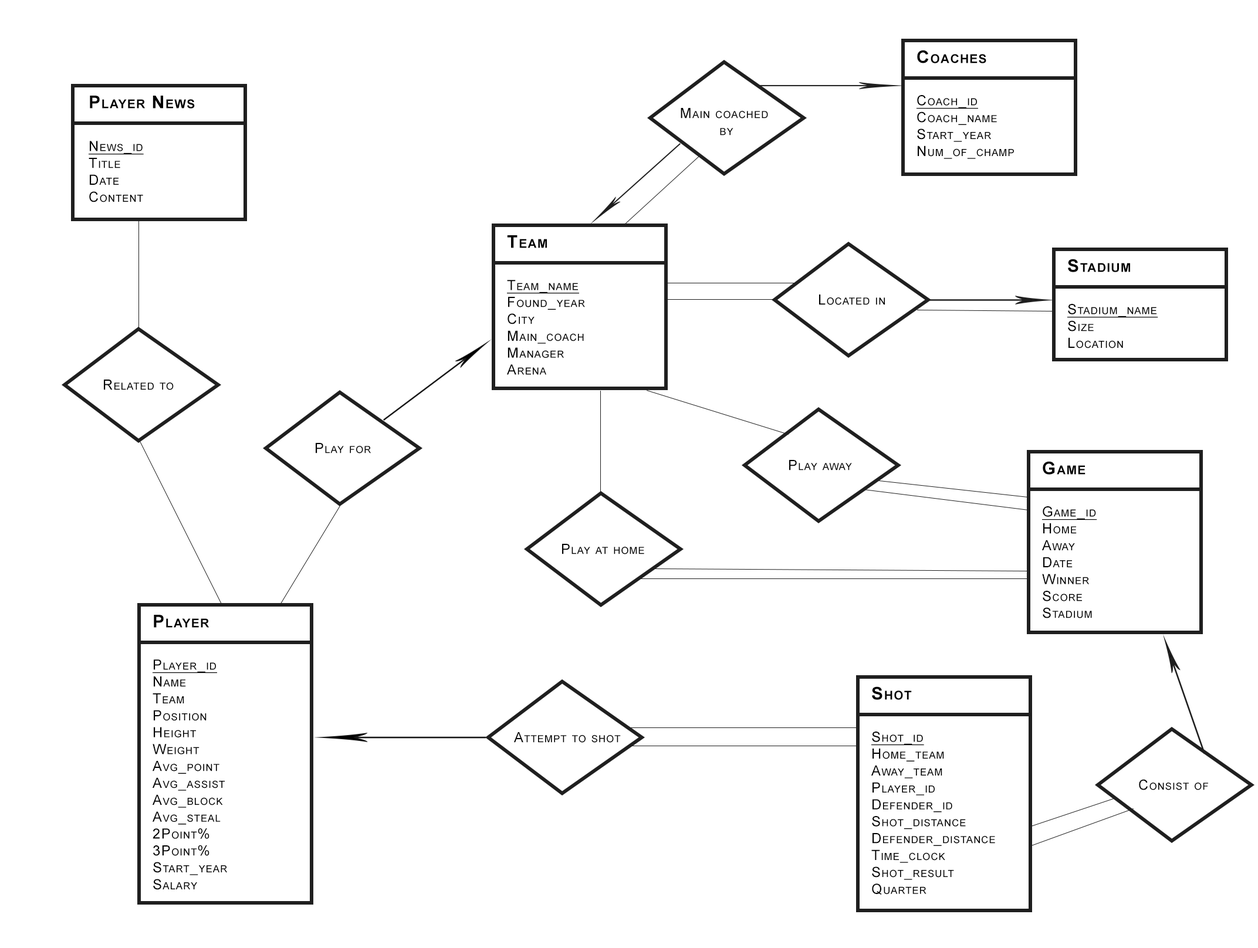
<style>
.page{position:relative;width:1258px;height:948px;background:#ffffff}
.page>*{position:absolute;margin:0}
.t1{font:17.6px "Arial-BoldMT";letter-spacing:0.06em;color:#000000;font-variant:small-caps}
.t2{font:14.1px "ArialMT";letter-spacing:0.06em;color:#000000;font-variant:small-caps}
.t3{font:14.1px "ArialMT";letter-spacing:0.06em;color:#000000;font-variant:small-caps;text-decoration:underline}
</style>
<div class="page">
<p class="t1" style="left:917px;top:50px;width:69px;height:13px">Coaches</p>
<p class="t1" style="left:90px;top:96px;width:105px;height:13px">Player News</p>
<p class="t2" style="left:916px;top:95px;width:98px;height:64px"><span class="t3">Coach_id<br></span>Coach_name<br>Start_year<br>Num_of_champ</p>
<p class="t2" style="left:681px;top:108px;width:87px;height:28px;text-align:center">Main coached <br>by</p>
<p class="t2" style="left:89px;top:141px;width:55px;height:61px"><span class="t3">News_id<br></span>Title<br>Date<br>Content</p>
<p class="t1" style="left:507px;top:235px;width:40px;height:13px">Team</p>
<p class="t1" style="left:1068px;top:259px;width:62px;height:13px">Stadium</p>
<p class="t2" style="left:507px;top:280px;width:78px;height:95px"><span class="t3">Team_name<br></span>Found_year<br>City<br>Main_coach<br>Manager<br>Arena</p>
<p class="t2" style="left:819px;top:295px;width:66px;height:10px">Located in</p>
<p class="t2" style="left:1067px;top:304px;width:91px;height:44px"><span class="t3">Stadium_name<br></span>Size<br>Location</p>
<p class="t2" style="left:104px;top:380px;width:70px;height:10px">Related to</p>
<p class="t2" style="left:316px;top:443px;width:55px;height:10px">Play for</p>
<p class="t2" style="left:789px;top:460px;width:63px;height:10px">Play away</p>
<p class="t1" style="left:1042px;top:461px;width:43px;height:14px">Game</p>
<p class="t2" style="left:1042px;top:506px;width:55px;height:112px"><span class="t3">Game_id<br></span>Home<br>Away<br>Date<br>Winner<br>Score<br>Stadium</p>
<p class="t2" style="left:562px;top:544px;width:82px;height:10px">Play at home</p>
<p class="t1" style="left:154px;top:615px;width:55px;height:13px">Player</p>
<p class="t2" style="left:153px;top:659px;width:74px;height:231px"><span class="t3">Player_id<br></span>Name <br>Team<br>Position<br>Height<br>Weight<br>Avg_point<br>Avg_assist<br>Avg_block<br>Avg_steal<br>2Point%<br>3Point%<br>Start_year<br>Salary</p>
<p class="t1" style="left:872px;top:686px;width:40px;height:14px">Shot</p>
<p class="t2" style="left:514px;top:732px;width:107px;height:11px">Attempt to shot</p>
<p class="t2" style="left:871px;top:732px;width:124px;height:163px"><span class="t3">Shot_id<br></span>Home_team<br>Away_team<br>Player_id<br>Defender_id<br>Shot_distance<br>Defender_distance<br>Time_clock<br>Shot_result<br>Quarter</p>
<p class="t2" style="left:1139px;top:779px;width:69px;height:11px">Consist of</p>
</div>
